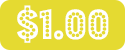
<style>
.page{position:relative;width:125px;height:50px;background:#e5da31}
.page>*{position:absolute;margin:0}
.t1{font:46.3px "BudmoJiggler-Regular";color:#ffffff;text-transform:uppercase}
</style>
<div class="page">
<p class="t1" style="left:17px;top:5px;width:92px;height:38px">$1.00</p>
</div>
